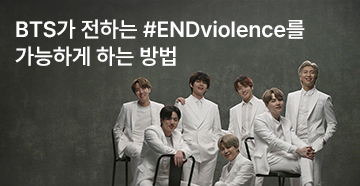
<style>
.page{position:relative;width:360px;height:186px}
.page>*{position:absolute;margin:0}
.t1{font:22px "Pretendard-SemiBold";color:#ffffff}
</style>
<div class="page">
<p class="t1" style="left:15px;top:19px;width:290px;height:47px">BTS가 전하는 #ENDviolence를 <br>가능하게 하는 방법</p>
</div>
